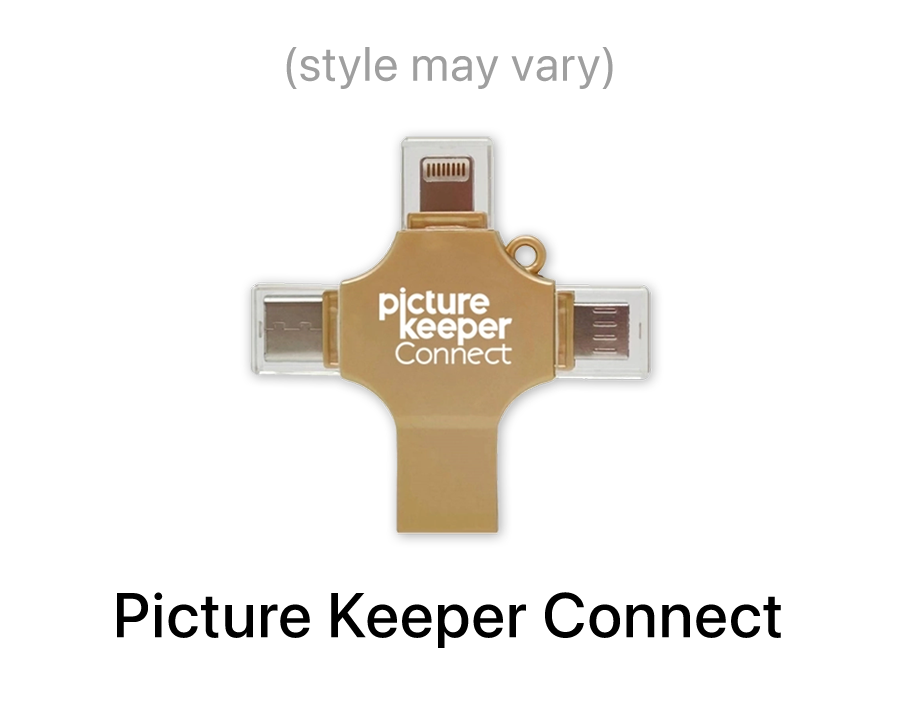
<style>
.page{position:relative;width:900px;height:720px;background:#ffffff}
.page>*{position:absolute;margin:0}
.t1{font:48px "SFPro-Regular";letter-spacing:0.025em;color:#9f9f9f}
.t2{font:62.7px "SFPro_500.000wght";letter-spacing:0.025em;color:#000000}
</style>
<div class="page">
<p class="t1" style="left:286px;top:47px;width:327px;height:42px">(style may vary)</p>
<p class="t2" style="left:117px;top:592px;width:664px;height:56px">Picture Keeper Connect</p>
</div>
